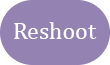
<style>
.page{position:relative;width:110px;height:65px;background:#9482b2}
.page>*{position:absolute;margin:0}
.t1{font:24px "Cambria";color:#ffffff}
</style>
<div class="page">
<p class="t1" style="left:14px;top:22px;width:83px;height:17px">Reshoot</p>
</div>
